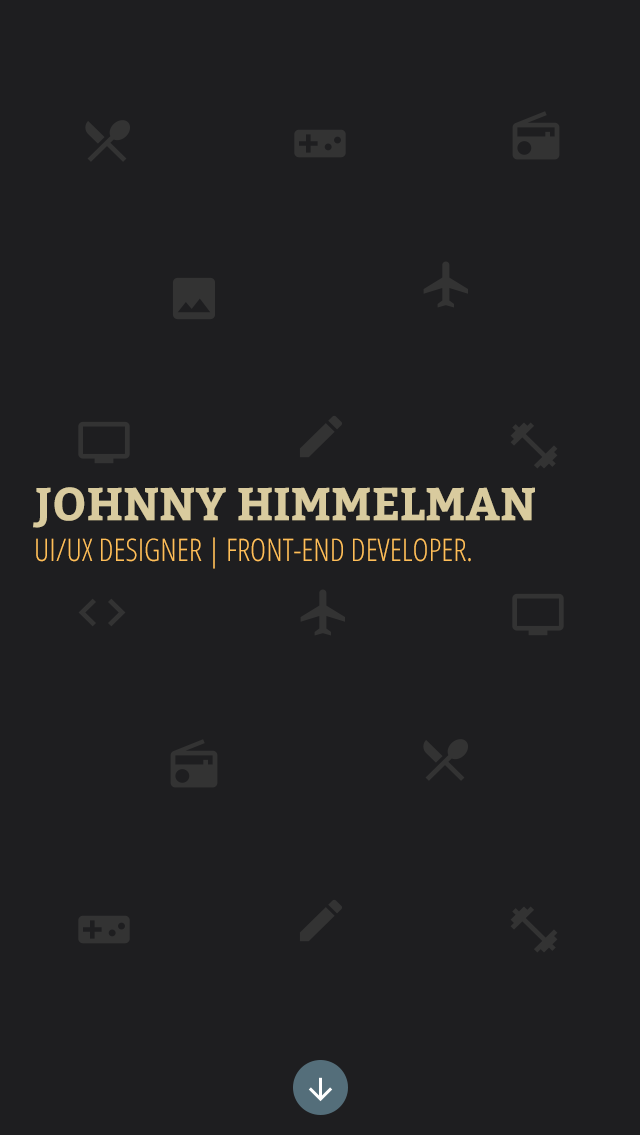
<style>
.page{position:relative;width:640px;height:1136px;background:#1e1e20}
.page>*{position:absolute;margin:0}
.t1{font:46px "Bitter-Bold";color:#d9cb9e;text-transform:uppercase}
.t2{font:31px "OpenSans-CondensedLight";color:#ffbf59;text-transform:uppercase}
</style>
<div class="page">
<p class="t1" style="left:33px;top:487px;width:502px;height:41px">Johnny Himmelman</p>
<p class="t2" style="left:36px;top:537px;width:435px;height:32px">UI/UX Designer | Front-End Developer.</p>
</div>
